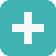
<style>
.page{position:relative;width:56px;height:56px;background:#42b2b1}
.page>*{position:absolute;margin:0}
.t1{font:60px "Helvetica-Bold";color:#f8f8f8}
</style>
<div class="page">
<p class="t1" style="left:12px;top:12px;width:32px;height:32px">+</p>
</div>
